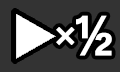
<style>
.page{position:relative;width:120px;height:72px;background:#333333}
.page>*{position:absolute;margin:0}
.t1{font:60px "LiberationMono-Bold";color:#ffffff}
.t2{font:36px "LiberationMono-Bold";color:#ffffff}
</style>
<div class="page">
<p class="t1" style="left:76px;top:15px;width:36px;height:41px">½</p>
<p class="t2" style="left:56px;top:27px;width:19px;height:19px">×</p>
</div>
